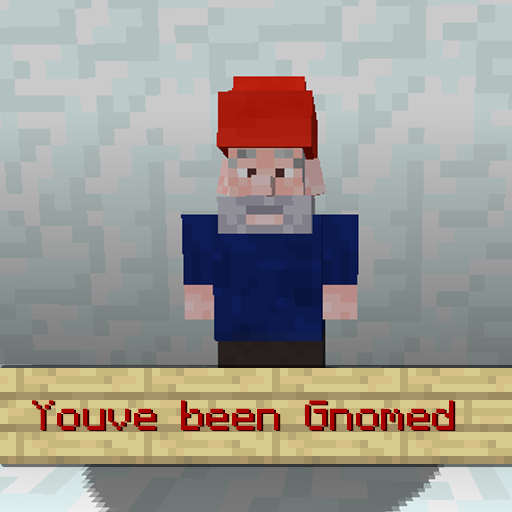
<style>
.page{position:relative;width:512px;height:512px}
.page>*{position:absolute;margin:0}
.t1{font:34px "Minecraftia";color:#aa0000}
.t2{font:34px "Minecraftia"}
</style>
<div class="page">
<p class="t1" style="left:32px;top:400px;width:422px;height:30px">Youve been Gnomed</p>
<p class="t2" style="left:34px;top:401px;width:422px;height:30px">Youve been Gnomed</p>
</div>
